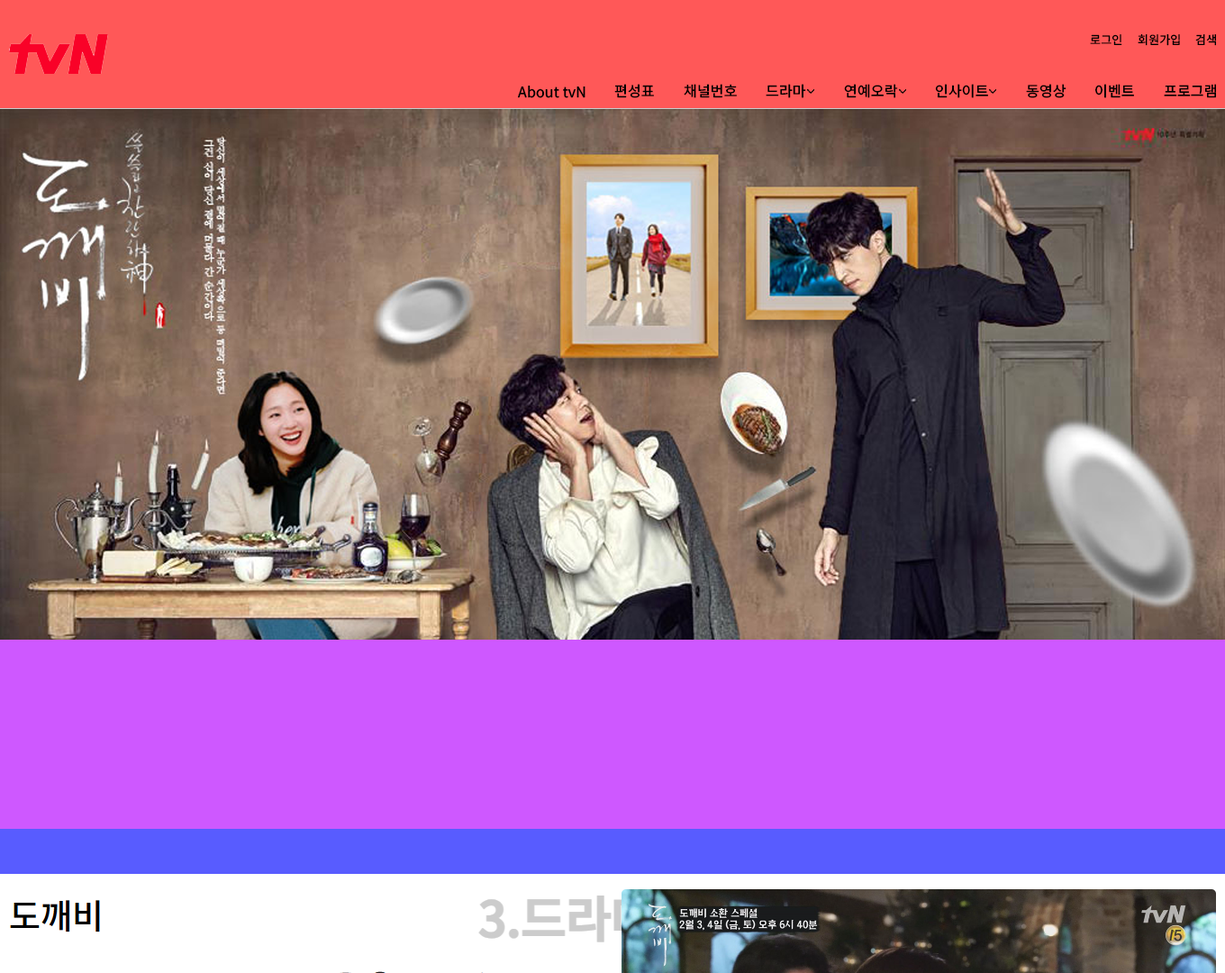
<style>
.page{position:relative;width:1225px;height:973px}
.page>*{position:absolute;margin:0}
.t1{font:11.7px "NotoSansKR-Regular";letter-spacing:0.01em;color:#000000}
.t2{font:14.4px "NotoSansKR-Regular";letter-spacing:0.01em;color:#000000}
</style>
<div class="page">
<p class="t1" style="left:1090px;top:34px;width:33px;height:11px">로그인</p>
<p class="t1" style="left:1138px;top:34px;width:42px;height:12px">회원가입</p>
<p class="t1" style="left:1196px;top:34px;width:20px;height:12px">검색</p>
<p class="t2" style="left:518px;top:86px;width:68px;height:12px">About tvN</p>
<p class="t2" style="left:614px;top:84px;width:40px;height:14px">편성표</p>
<p class="t2" style="left:684px;top:84px;width:53px;height:14px">채널번호</p>
<p class="t2" style="left:766px;top:84px;width:40px;height:14px">드라마</p>
<p class="t2" style="left:844px;top:84px;width:54px;height:14px">연예오락</p>
<p class="t2" style="left:935px;top:84px;width:53px;height:14px">인사이트</p>
<p class="t2" style="left:1026px;top:84px;width:41px;height:14px">동영상</p>
<p class="t2" style="left:1096px;top:84px;width:38px;height:14px">이벤트</p>
<p class="t2" style="left:1164px;top:84px;width:52px;height:14px">프로그램</p>
</div>
